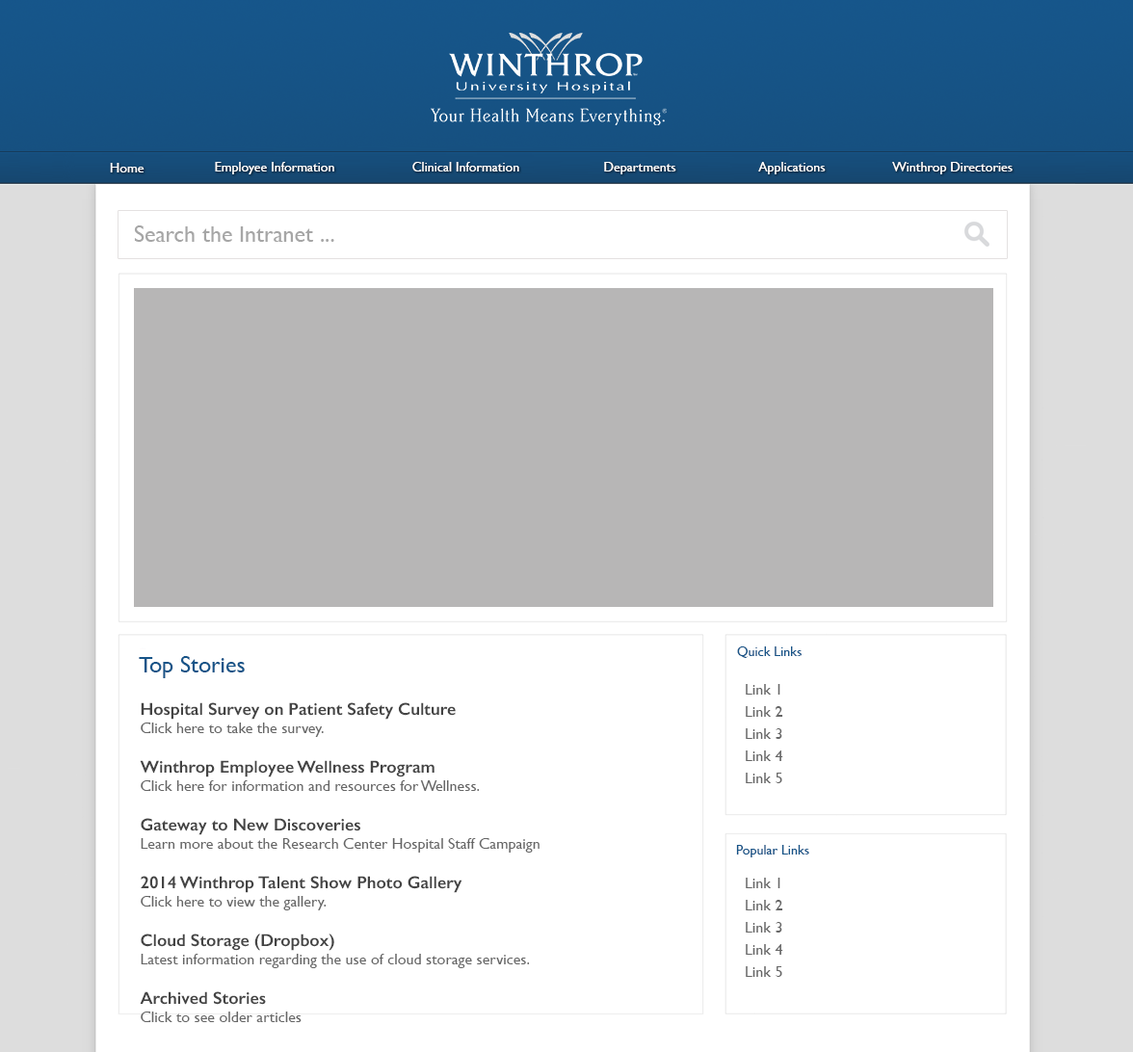
<style>
.page{position:relative;width:1133px;height:1052px;background:#ffffff}
.page>*{position:absolute;margin:0}
.t1{font:13.5px "GillSans";color:#ffffff}
.t2{font:23.1px "GillSans";color:#a6a6a6}
.t3{font:13.5px "GillSans";color:#165488}
.t4{font:23.1px "GillSans";color:#165488}
.t5{font:15.4px/22.2px "GillSans";color:#666666}
.t6{font:15.4px "GillSans";color:#666666}
.t7{font:17.3px "GillSans-SemiBold";color:#444444}
</style>
<div class="page">
<p class="t1" style="left:215px;top:162px;width:119px;height:12px">Employee Information</p>
<p class="t1" style="left:412px;top:162px;width:107px;height:10px">Clinical Information</p>
<p class="t1" style="left:604px;top:162px;width:72px;height:12px">Departments</p>
<p class="t1" style="left:758px;top:162px;width:68px;height:12px">Applications</p>
<p class="t1" style="left:892px;top:162px;width:121px;height:12px">Winthrop Directories</p>
<p class="t1" style="left:110px;top:163px;width:35px;height:9px">Home</p>
<p class="t2" style="left:134px;top:225px;width:200px;height:17px">Search the Intranet ...</p>
<p class="t3" style="left:737px;top:647px;width:65px;height:11px">Quick Links</p>
<p class="t4" style="left:139px;top:656px;width:106px;height:22px">Top Stories</p>
<p class="t5" style="left:746px;top:684px;width:37px;height:99px">Link 1<br>Link 2<br>Link 3<br>Link 4<br>Link 5</p>
<p class="t6" style="left:140px;top:702px;width:400px;height:320px"><span class="t7">Hospital Survey on Patient Safety Culture<br></span>Click here to take the survey.<br><br><span class="t7">Winthrop Employee Wellness Program<br></span>Click here for information and resources for Wellness.<br><br><span class="t7">Gateway to New Discoveries<br></span>Learn more about the Research Center Hospital Staff Campaign<br><br><span class="t7">2014 Winthrop Talent Show Photo Gallery<br></span>Click here to view the gallery.<br><br><span class="t7">Cloud Storage (Dropbox) <br></span>Latest information regarding the use of cloud storage services.<br><br><span class="t7">Archived Stories<br></span>Click to see older articles</p>
<p class="t3" style="left:736px;top:845px;width:73px;height:13px">Popular Links</p>
<p class="t5" style="left:746px;top:878px;width:37px;height:99px">Link 1<br>Link 2<br>Link 3<br>Link 4<br>Link 5</p>
</div>
